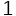
<style>
.page{position:relative;width:16px;height:16px;background:#ffffff}
.page>*{position:absolute;margin:0}
.t1{font:20px "DengXian";color:#000000}
</style>
<div class="page">
<p class="t1" style="left:4px;top:1px;width:9px;height:14px">1</p>
</div>
